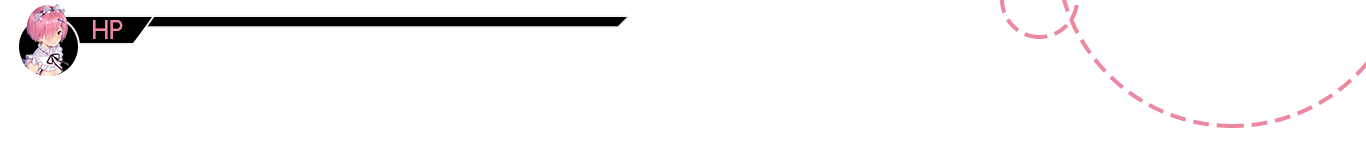
<style>
.page{position:relative;width:1366px;height:150px;background:#ffffff}
.page>*{position:absolute;margin:0}
.t1{font:25.3px "HKExplorerSharp-Regular";letter-spacing:-0.035em;color:#ed88a1}
</style>
<div class="page">
<p class="t1" style="left:93px;top:20px;width:30px;height:19px">HP</p>
</div>
